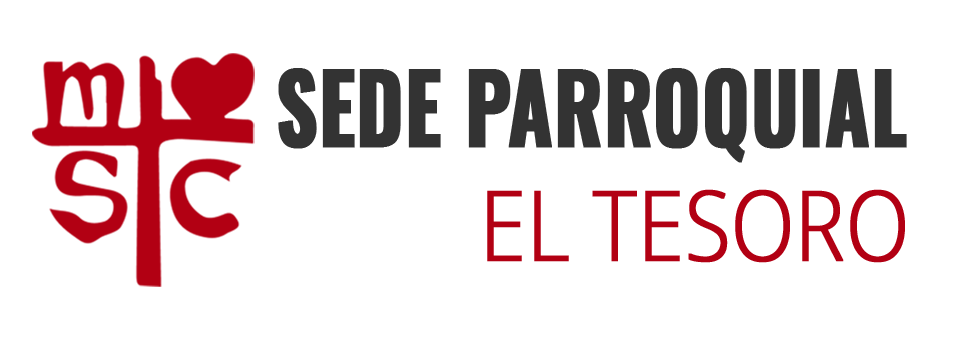
<style>
.page{position:relative;width:960px;height:342px;background:#ffffff}
.page>*{position:absolute;margin:0}
.t1{font:95px "Oswald-Bold";letter-spacing:-0.01em;color:#333333;font-weight:bold;scale:0.85 1}
.t2{font:97px "OpenSans-Light";letter-spacing:-0.01em;color:#b20013;font-weight:bold;scale:0.85 1}
</style>
<div class="page">
<p class="t1" style="left:278px;top:68px;width:629px;height:95px">SEDE PARROQUIAL</p>
<p class="t2" style="left:487px;top:189px;width:418px;height:74px">EL TESORO</p>
</div>
